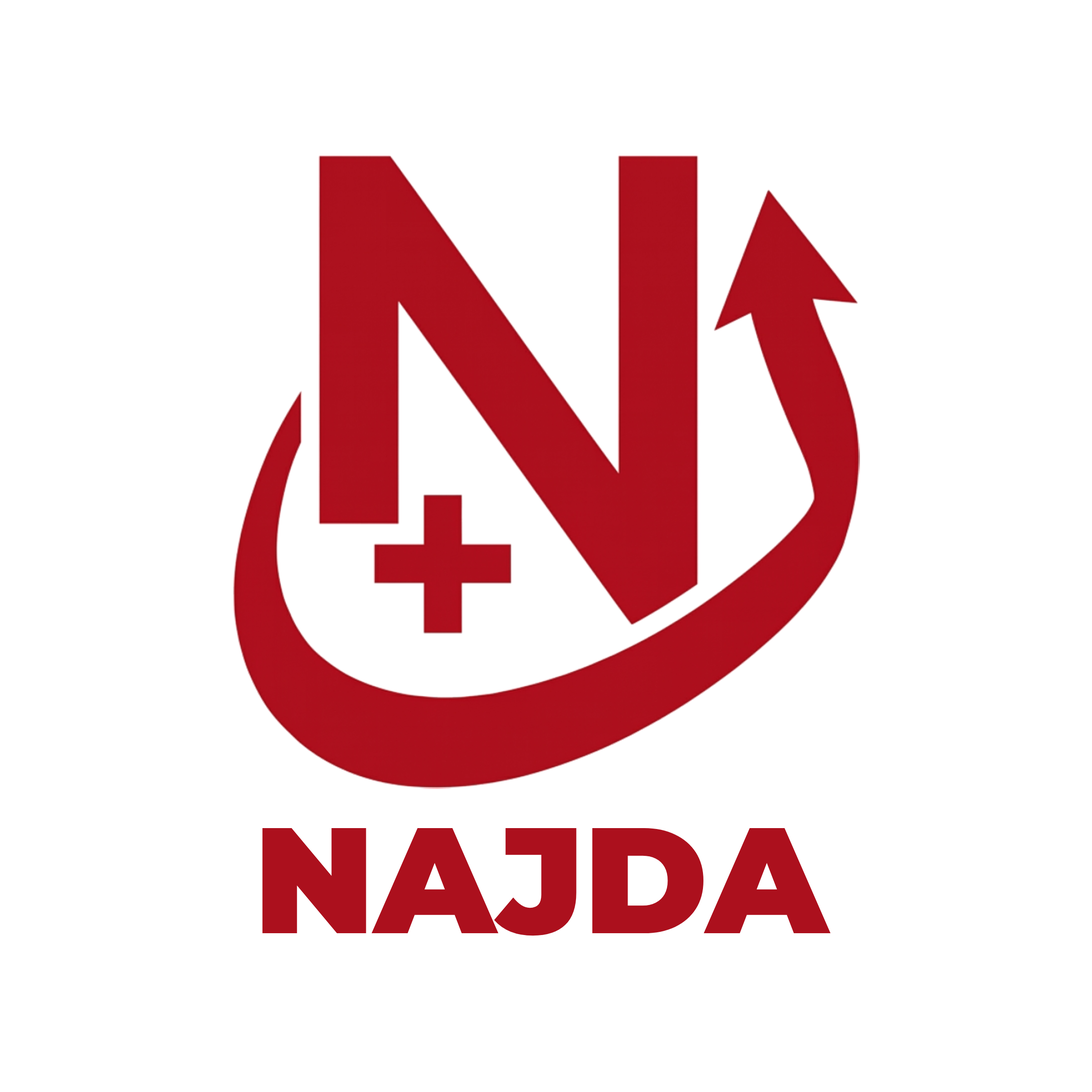
<style>
.page{position:relative;width:1092px;height:1092px;background:#ffffff}
.page>*{position:absolute;margin:0}
.t1{font:150.1px "Montserrat-Black";color:#ac101d}
</style>
<div class="page">
<p class="t1" style="left:262px;top:828px;width:569px;height:108px">NAJDA</p>
</div>
